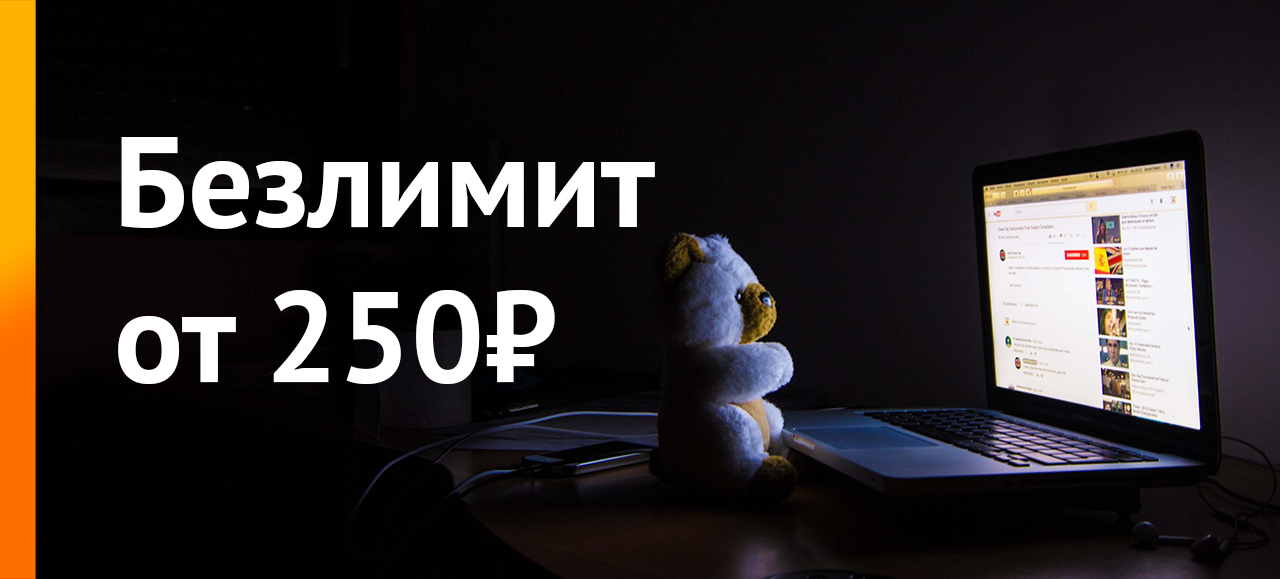
<style>
.page{position:relative;width:1280px;height:579px}
.page>*{position:absolute;margin:0}
.t1{font:128.8px "PTSans-Bold";color:#ffffff}
</style>
<div class="page">
<p class="t1" style="left:118px;top:137px;width:537px;height:247px">Безлимит<br>от 250₽</p>
</div>
